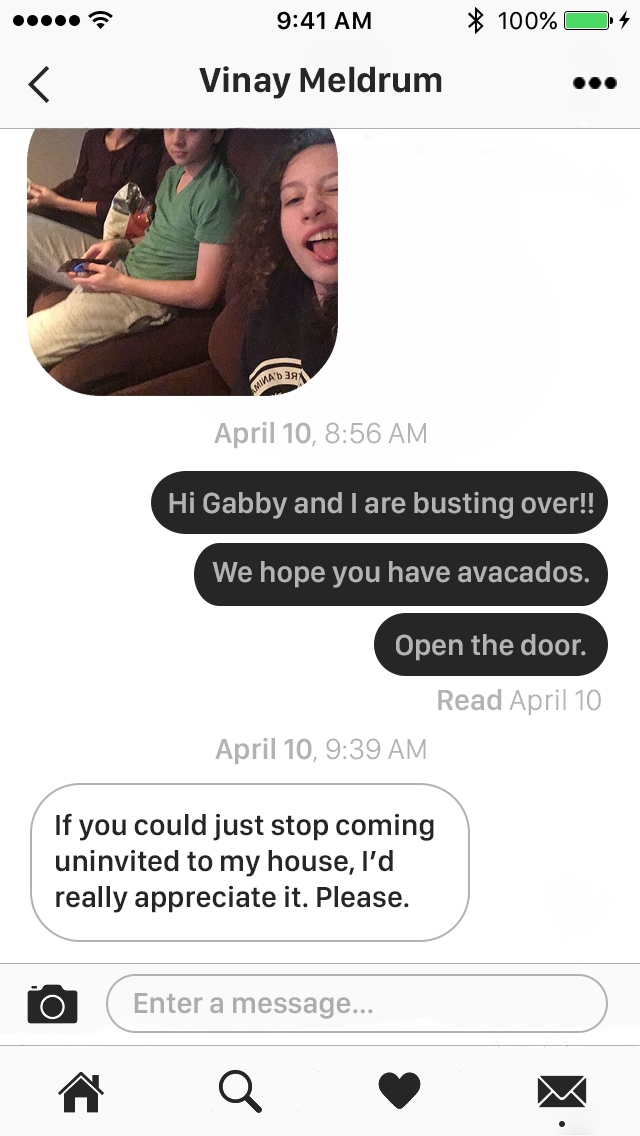
<style>
.page{position:relative;width:640px;height:1136px;background:#ffffff}
.page>*{position:absolute;margin:0}
.t1{font:36px "SanFranciscoDisplay-Bold";color:#262626}
.t2{font:30px "SanFranciscoDisplay-Regular";color:#b3b3b3}
.t3{font:30px "SanFranciscoDisplay-Semibold";color:#b3b3b3}
.t4{font:30px "SanFranciscoDisplay-Semibold";color:#262626}
.t5{font:30px "SanFranciscoDisplay-Semibold";color:#adadad}
</style>
<div class="page">
<p class="t1" style="left:199px;top:66px;width:243px;height:33px">Vinay Meldrum</p>
<p class="t2" style="left:214px;top:421px;width:212px;height:28px"><span class="t3">April 10</span>, 8:56 AM</p>
<p class="t3" style="left:169px;top:491px;width:425px;height:28px">Hi Gabby and I are busting over!!</p>
<p class="t3" style="left:212px;top:561px;width:377px;height:27px">We hope you have avacados.</p>
<p class="t3" style="left:396px;top:634px;width:190px;height:27px">Open the door.</p>
<p class="t2" style="left:438px;top:689px;width:163px;height:27px"><span class="t3">Read </span>April 10</p>
<p class="t2" style="left:215px;top:737px;width:211px;height:28px"><span class="t3">April 10</span>, 9:39 AM</p>
<p class="t4" style="left:56px;top:813px;width:378px;height:100px">If you could just stop coming<br>uninvited to my house, I’d<br>really appreciate it. Please.</p>
<p class="t5" style="left:134px;top:993px;width:239px;height:26px">Enter a message...</p>
</div>
